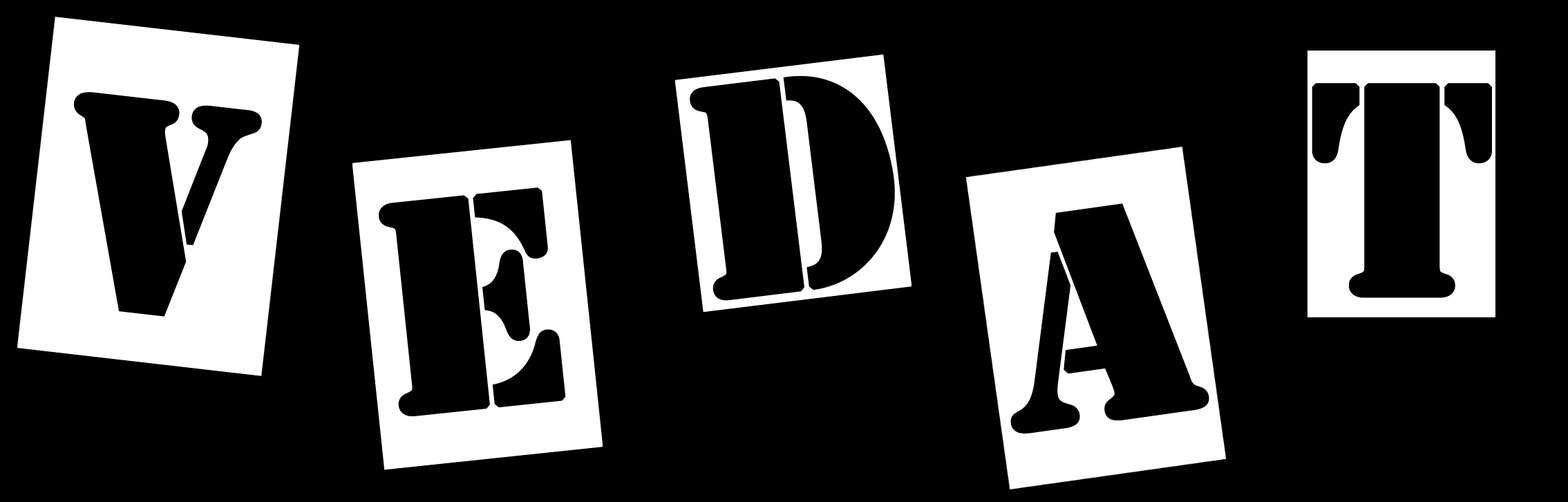
<style>
.page{position:relative;width:1568px;height:502px;background:#000000}
.page>*{position:absolute;margin:0}
.t1{font:276.4px "StencilStd";letter-spacing:0.24em;color:#000000;font-weight:bold}
</style>
<div class="page">
<p class="t1" style="left:690px;top:76px;width:205px;height:225px;rotate:-7deg">D</p>
<p class="t1" style="left:1312px;top:83px;width:180px;height:215px">T</p>
<p class="t1" style="left:74px;top:92px;width:188px;height:225px;rotate:7deg">V</p>
<p class="t1" style="left:379px;top:187px;width:187px;height:229px;rotate:-6deg">E</p>
<p class="t1" style="left:1010px;top:203px;width:199px;height:230px;rotate:-8deg">A</p>
</div>
